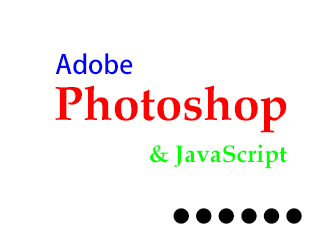
<style>
.page{position:relative;width:320px;height:240px;background:#ffffff}
.page>*{position:absolute;margin:0}
.t1{font:26px "KozGoPr6N-Medium";color:#0000ff}
.t2{font:48px "Palatino-Bold";color:#ff0000}
.t3{font:24px "Palatino-Bold";color:#00ff00}
.t4{font:24px "Meiryo-Bold";letter-spacing:-0.06em;color:#000000}
</style>
<div class="page">
<p class="t1" style="left:55px;top:53px;width:78px;height:22px">Adobe</p>
<p class="t2" style="left:55px;top:85px;width:232px;height:48px">Photoshop</p>
<p class="t3" style="left:150px;top:144px;width:137px;height:25px">&amp; JavaScript</p>
<p class="t4" style="left:173px;top:208px;width:129px;height:16px">●●●●●●</p>
</div>
